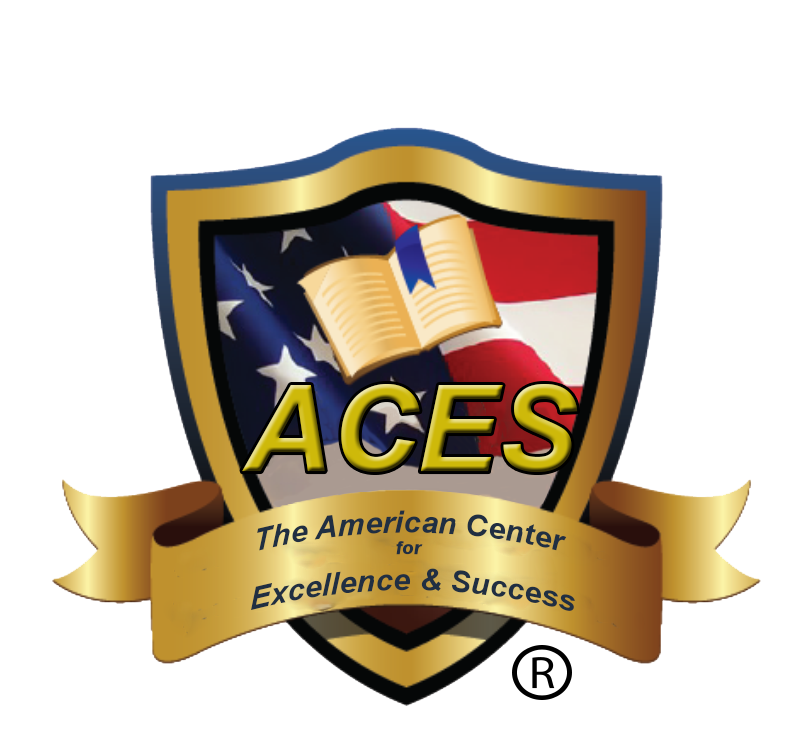
<style>
.page{position:relative;width:800px;height:744px;background:#ffffff}
.page>*{position:absolute;margin:0}
.t1{font:120px "Arial-BoldItalicMT";letter-spacing:-0.005em}
.t2{font:30px "Arial-BoldItalicMT";letter-spacing:0.01em;color:#202f42}
.t3{font:18px "Arial-BoldItalicMT";letter-spacing:0.01em;color:#202f42}
</style>
<div class="page">
<p class="t1" style="left:242px;top:384px;width:336px;height:88px">ACES</p>
<p class="t2" style="left:251px;top:510px;width:324px;height:101px;text-align:center">The American Center<br><span class="t3">for<br></span> Excellence &amp; Success</p>
</div>
